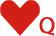
<style>
.page{position:relative;width:56px;height:36px;background:#ffffff}
.page>*{position:absolute;margin:0}
.t1{font:23.4px "MyriadPro-Regular";letter-spacing:-0.1em;color:#d22018;font-weight:bold}
</style>
<div class="page">
<p class="t1" style="left:39px;top:17px;width:16px;height:19px">Q</p>
</div>
